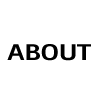
<style>
.page{position:relative;width:100px;height:100px;background:#ffffff}
.page>*{position:absolute;margin:0}
.t1{font:21.5px "Sintony-Bold";letter-spacing:-0.02em;color:#000000;scale:1.25 1}
</style>
<div class="page">
<p class="t1" style="left:7px;top:44px;width:84px;height:17px">ABOUT</p>
</div>
